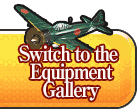
<style>
.page{position:relative;width:137px;height:109px}
.page>*{position:absolute;margin:0}
.t1{font:21px/18px "RyuminPro-ExBold";letter-spacing:-0.08em;color:#fff8f4;scale:0.9 1}
</style>
<div class="page">
<p class="t1" style="left:19px;top:45px;width:99px;height:56px;text-align:center">Switch to the <br>Equipment<br>Gallery</p>
</div>
